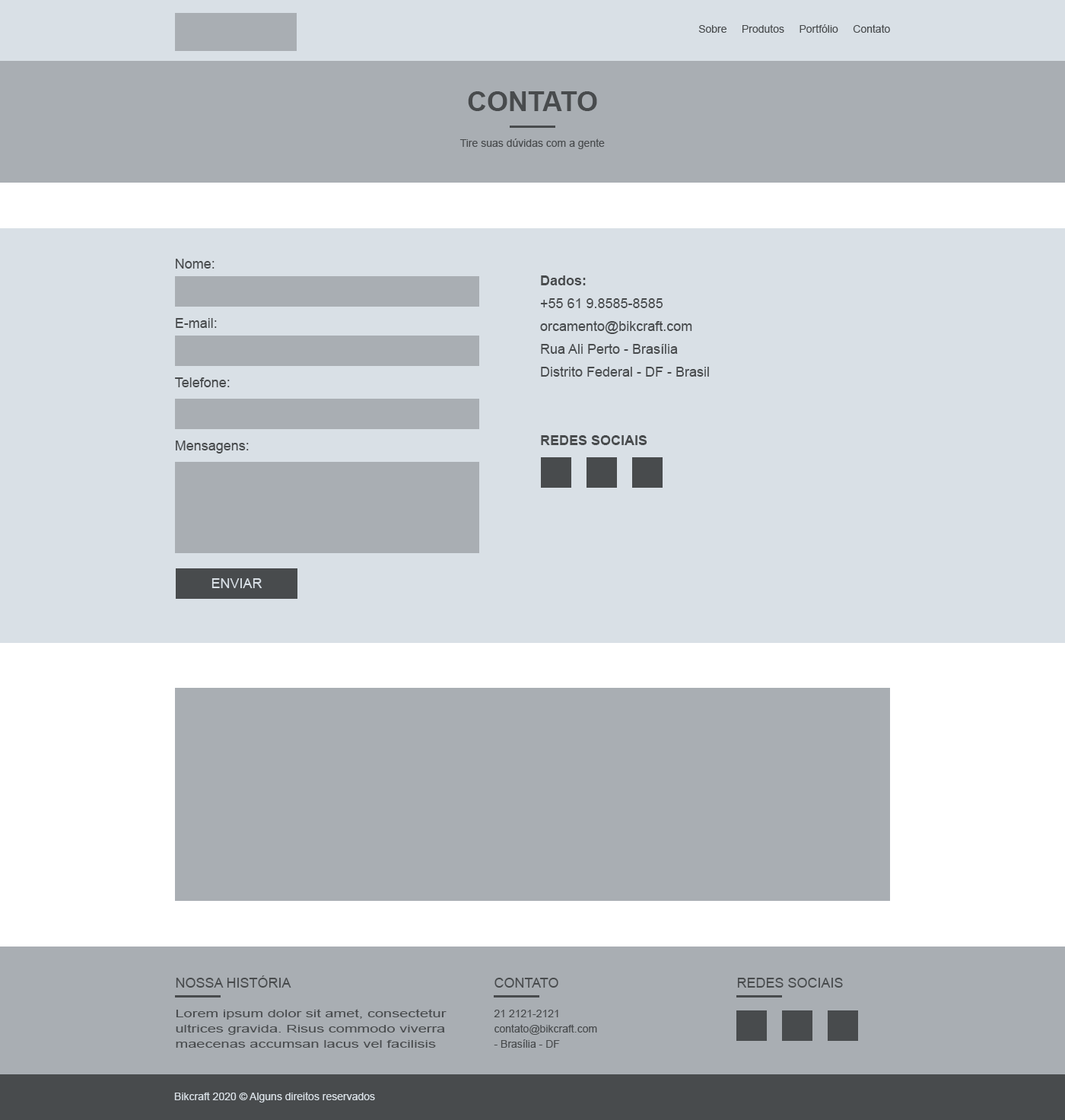
<style>
.page{position:relative;width:1065px;height:1120px;background:#a9aeb3}
.page>*{position:absolute;margin:0}
.t1{font:10.6px "ArialMT";color:#484b4d}
.t2{font:27.4px "Arial-BoldMT";color:#484b4d;text-transform:uppercase}
.t3{font:13.7px "ArialMT";color:#484b4d}
.t4{font:13.7px/22.8px "ArialMT";color:#484b4d}
.t5{font:13.7px/22.8px "Arial-BoldMT";color:#484b4d}
.t6{font:10.6px/22.8px "ArialMT";color:#484b4d}
.t7{font:13.7px "ArialMT";color:#d9e0e6}
.t8{font:13.7px "ArialMT";color:#484b4d;text-transform:uppercase}
.t9{font:10.6px/15.2px "ArialMT";color:#484b4d;scale:1.43 1}
.t10{font:10.6px/15.2px "ArialMT";color:#484b4d}
.t11{font:10.6px "ArialMT";color:#d9e0e6}
</style>
<div class="page">
<p class="t1" style="left:698px;top:24px;width:192px;height:9px">Sobre     Produtos     Portfólio     Contato</p>
<p class="t2" style="left:468px;top:91px;width:129px;height:20px">CONTATO</p>
<p class="t1" style="left:459px;top:138px;width:146px;height:11px">Tire suas dúvidas com a gente</p>
<p class="t3" style="left:176px;top:259px;width:39px;height:10px">Nome:</p>
<p class="t4" style="left:540px;top:275px;width:169px;height:170px"><span class="t5">Dados:</span> <br>+55 61 9.8585-8585<br>orcamento@bikcraft.com<br>Rua Ali Perto - Brasília<br>Distrito Federal - DF - Brasil<br><br><br><span class="t5">REDES SOCIAIS<br></span><span class="t6"></span></p>
<p class="t3" style="left:176px;top:318px;width:41px;height:10px">E-mail:</p>
<p class="t3" style="left:175px;top:377px;width:55px;height:10px">Telefone:</p>
<p class="t3" style="left:176px;top:440px;width:73px;height:13px">Mensagens:</p>
<p class="t7" style="left:211px;top:578px;width:51px;height:10px">ENVIAR</p>
<p class="t8" style="left:176px;top:975px;width:115px;height:12px">Nossa História</p>
<p class="t8" style="left:494px;top:977px;width:64px;height:10px">contato</p>
<p class="t8" style="left:737px;top:977px;width:106px;height:10px">redes sociais</p>
<p class="t9" style="left:176px;top:1009px;width:271px;height:38px">Lorem ipsum dolor sit amet, consectetur ultrices gravida. Risus commodo viverra maecenas accumsan lacus vel facilisis</p>
<p class="t10" style="left:494px;top:1009px;width:103px;height:38px">21 2121-2121<br>contato@bikcraft.com<br>- Brasília - DF</p>
<p class="t11" style="left:174px;top:1092px;width:201px;height:10px">Bikcraft 2020 © Alguns direitos reservados</p>
</div>
